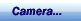
<style>
.page{position:relative;width:81px;height:21px}
.page>*{position:absolute;margin:0}
.t1{font:12px "FranklinGothic-DemiItalic";color:#0e096b}
</style>
<div class="page">
<p class="t1" style="left:12px;top:6px;width:50px;height:10px">Camera...</p>
</div>
